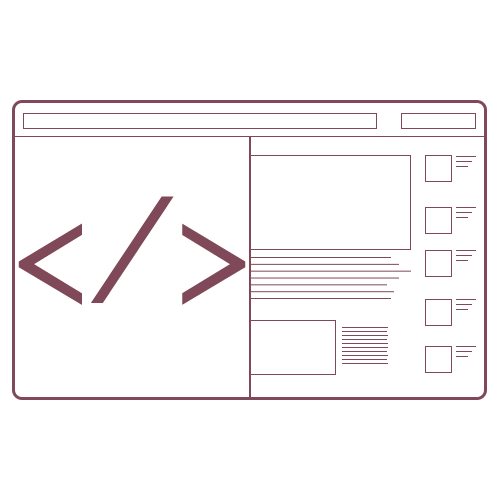
<style>
.page{position:relative;width:500px;height:500px;background:#ffffff}
.page>*{position:absolute;margin:0}
.t1{font:150px "Raleway-Regular";letter-spacing:-0.02em;color:#7f4959}
</style>
<div class="page">
<p class="t1" style="left:18px;top:196px;width:228px;height:109px">&lt;/&gt;</p>
</div>
